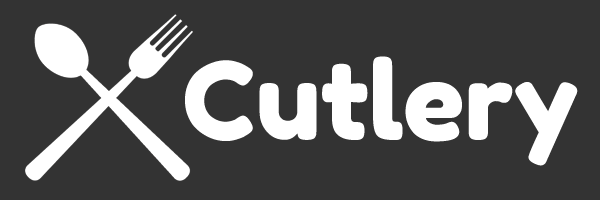
<style>
.page{position:relative;width:600px;height:200px;background:#333333}
.page>*{position:absolute;margin:0}
.t1{font:107.6px "FredokaOne-Regular";color:#ffffff}
</style>
<div class="page">
<p class="t1" style="left:185px;top:56px;width:393px;height:110px">Cutlery</p>
</div>
